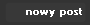
<style>
.page{position:relative;width:90px;height:25px;background:#383838}
.page>*{position:absolute;margin:0}
.t1{font:10px "Tahoma";color:#ffffff;font-weight:bold}
</style>
<div class="page">
<p class="t1" style="left:26px;top:8px;width:56px;height:9px">nowy post</p>
</div>
